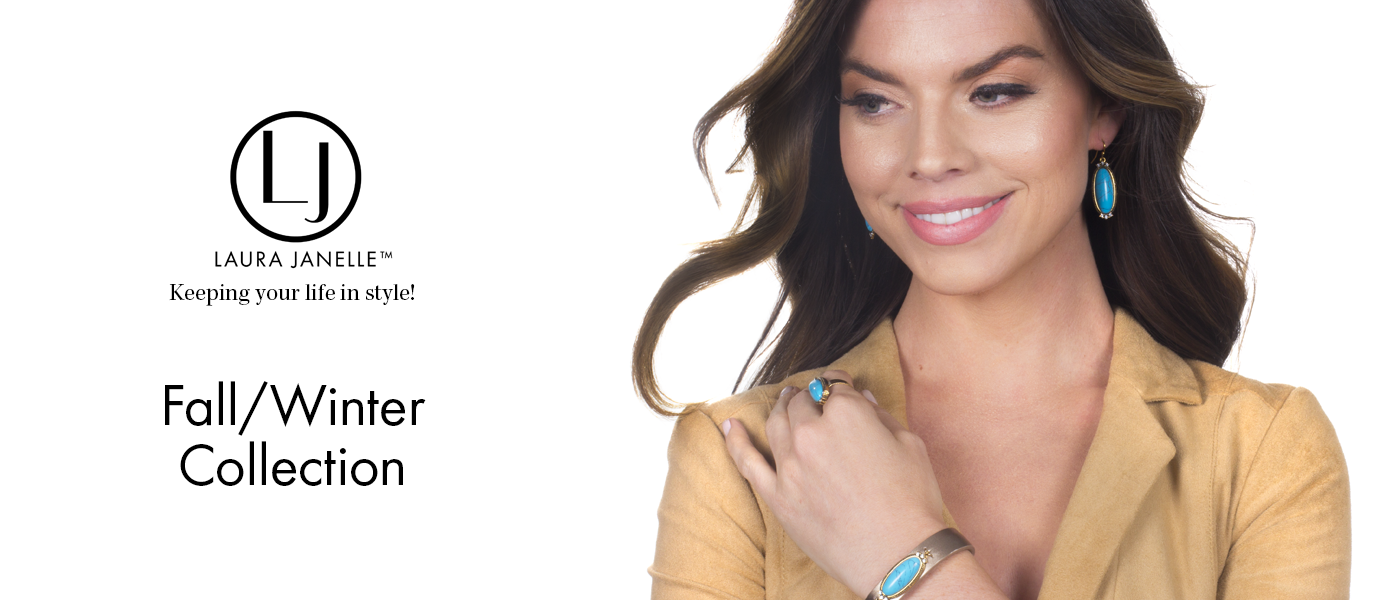
<style>
.page{position:relative;width:1400px;height:600px;background:#ffffff}
.page>*{position:absolute;margin:0}
.t1{font:24px "KeplerStd-Regular";color:#000000}
.t2{font:60px/60px "Futura-Boo";color:#000000}
</style>
<div class="page">
<p class="t1" style="left:169px;top:284px;width:246px;height:22px">Keeping your life in style!</p>
<p class="t2" style="left:165px;top:381px;width:261px;height:105px;text-align:center">Fall/Winter<br>Collection</p>
</div>
